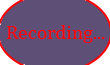
<style>
.page{position:relative;width:110px;height:65px;background:#5e4f76}
.page>*{position:absolute;margin:0}
.t1{font:20px "Cambria";color:#ff0000}
</style>
<div class="page">
<p class="t1" style="left:7px;top:25px;width:98px;height:18px">Recording...</p>
</div>
